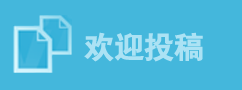
<style>
.page{position:relative;width:242px;height:90px;background:#44b7dc}
.page>*{position:absolute;margin:0}
.t1{font:30px "STJTBZ";color:#abe2f4}
</style>
<div class="page">
<p class="t1" style="left:84px;top:32px;width:119px;height:30px">欢迎投稿</p>
</div>
